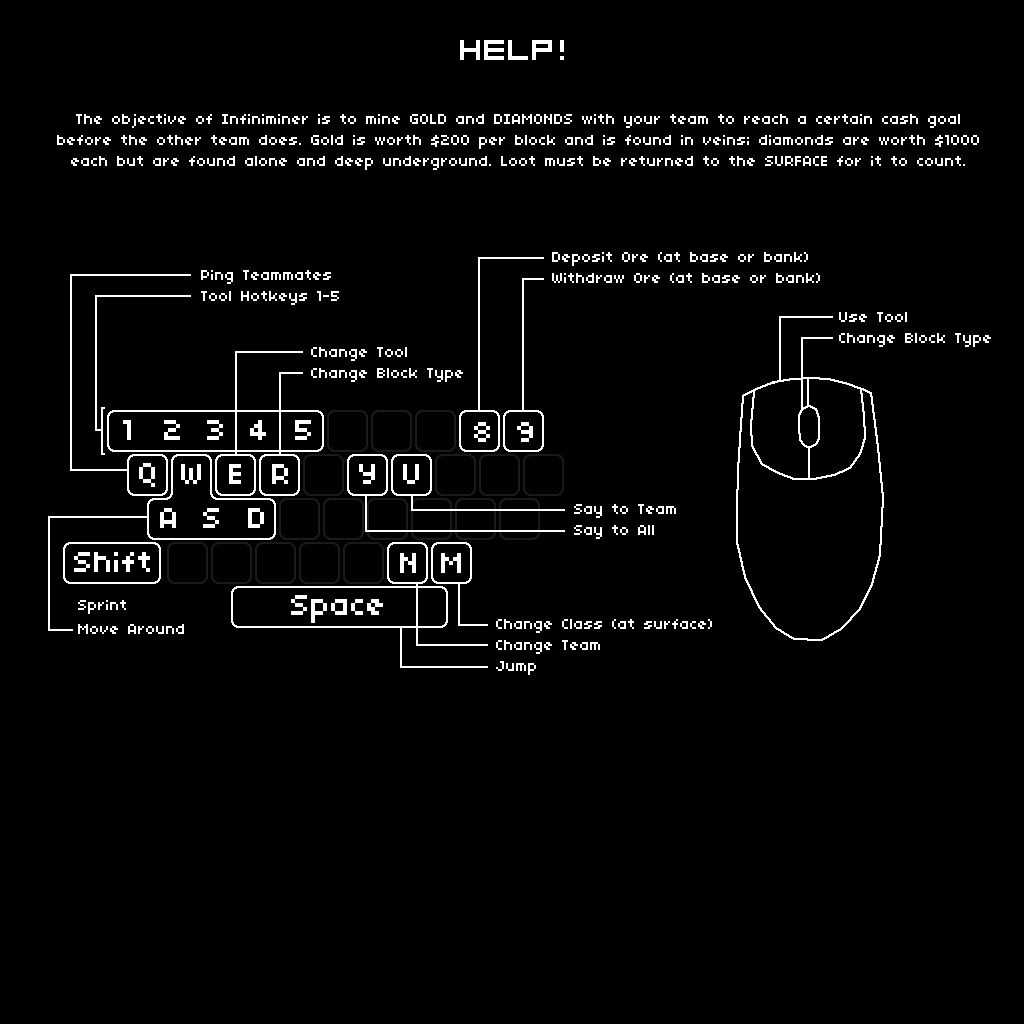
<style>
.page{position:relative;width:1024px;height:1024px;background:#000000}
.page>*{position:absolute;margin:0}
.t1{font:32px "04b08";color:#ffffff}
.t2{font:16px/21px "04b03";color:#ffffff}
.t3{font:32px "04b03";color:#ffffff}
.t4{font:16px "04b03";color:#ffffff}
</style>
<div class="page">
<p class="t1" style="left:460px;top:40px;width:104px;height:20px">HELP!</p>
<p class="t2" style="left:57px;top:114px;width:922px;height:56px;text-align:center">The objective of Infiniminer is to mine GOLD and DIAMONDS with your team to reach a certain cash goal<br>before the other team does. Gold is worth $200 per block and is found in veins; diamonds are worth $1000<br>each but are found alone and deep underground. Loot must be returned to the SURFACE for it to count.</p>
<p class="t2" style="left:552px;top:252px;width:268px;height:31px">Deposit Ore (at base or bank)<br>Withdraw Ore (at base or bank)</p>
<p class="t2" style="left:201px;top:270px;width:138px;height:35px">Ping Teammates<br>Tool Hotkeys 1-5</p>
<p class="t2" style="left:839px;top:312px;width:152px;height:35px">Use Tool<br>Change Block Type</p>
<p class="t2" style="left:311px;top:347px;width:152px;height:35px">Change Tool<br>Change Block Type</p>
<p class="t3" style="left:207px;top:420px;width:16px;height:20px">3</p>
<p class="t3" style="left:250px;top:420px;width:16px;height:20px">4</p>
<p class="t3" style="left:295px;top:420px;width:16px;height:20px">5</p>
<p class="t3" style="left:474px;top:422px;width:16px;height:20px">8</p>
<p class="t3" style="left:517px;top:422px;width:16px;height:20px">9</p>
<p class="t2" style="left:574px;top:504px;width:102px;height:35px">Say to Team<br>Say to All</p>
<p class="t3" style="left:74px;top:552px;width:76px;height:20px">Shift</p>
<p class="t4" style="left:78px;top:600px;width:48px;height:14px">Sprint</p>
<p class="t4" style="left:78px;top:624px;width:106px;height:10px">Move Around</p>
<p class="t2" style="left:496px;top:619px;width:216px;height:56px">Change Class (at surface)<br>Change Team<br>Jump</p>
</div>
